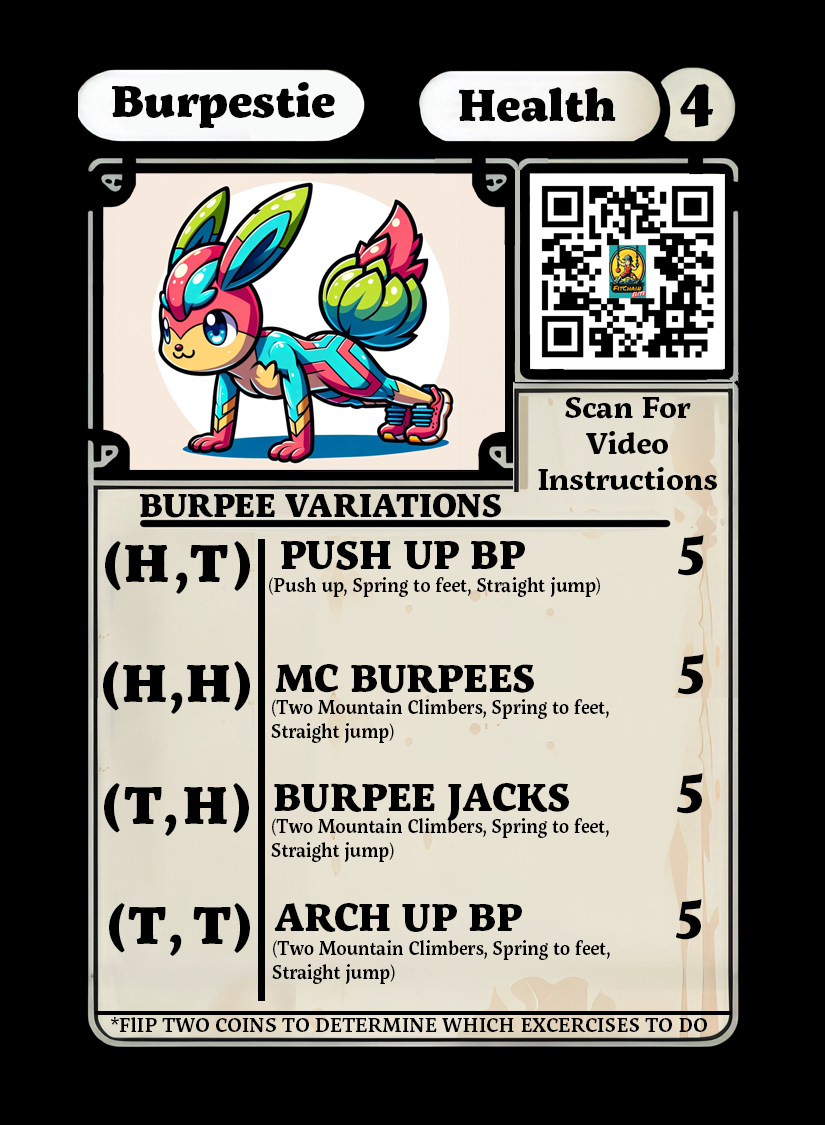
<style>
.page{position:relative;width:825px;height:1125px;background:#000000}
.page>*{position:absolute;margin:0}
.t1{font:45px "ServusSlab-Black";color:#010101}
.t2{font:60px "ServusSlab-Black";color:#010101}
.t3{font:30px "ServusSlab-Bold";color:#010101}
.t4{font:32.7px "ServusSlab-ExtraBold";color:#000000}
.t5{font:53.5px "ServusSlab-Black";letter-spacing:0.1em;color:#010101}
.t6{font:56.9px "ServusSlab-Black";letter-spacing:0.05em;color:#010101}
.t7{font:39.5px "ServusSlab-ExtraBold";color:#000000}
.t8{font:55px "ServusSlab-ExtraBold";color:#000000}
.t9{font:20px "ServusSlab-SemiBold";color:#000000;scale:0.92 1}
.t10{font:20px "ServusSlab-Regular";color:#000000;scale:0.92 1}
.t11{font:53.5px "ServusSlab-Black";letter-spacing:0.05em;color:#000000}
.t12{font:56.9px "ServusSlab-Black";letter-spacing:0.05em;color:#000000}
.t13{font:38.9px "ServusSlab-ExtraBold";color:#000000}
.t14{font:20px "ServusSlab-SemiBold";color:#000000;scale:0.91 1}
.t15{font:20px "ServusSlab-Regular";color:#000000;scale:0.91 1}
.t16{font:53.5px "ServusSlab-Black";letter-spacing:0.2em;color:#000000}
.t17{font:19.9px "ServusSlab-SemiBold";color:#000000}
</style>
<div class="page">
<p class="t1" style="left:112px;top:82px;width:223px;height:46px">Burpestie</p>
<p class="t1" style="left:459px;top:87px;width:157px;height:35px">Health</p>
<p class="t2" style="left:680px;top:84px;width:34px;height:44px">4</p>
<p class="t3" style="left:538px;top:397px;width:179px;height:93px;text-align:center">Scan For Video<br>Instructions</p>
<p class="t4" style="left:139px;top:493px;width:362px;height:25px">BURPEE VARIATIONS</p>
<p class="t5" style="left:105px;top:541px;width:145px;height:53px"><span class="t6">(</span>H,T<span class="t6">)</span></p>
<p class="t7" style="left:281px;top:541px;width:244px;height:29px">PUSH UP BP</p>
<p class="t8" style="left:678px;top:535px;width:26px;height:41px">5</p>
<p class="t9" style="left:269px;top:577px;width:331px;height:20px"><span class="t10">(</span>Push up, Spring to feet, Straight jump<span class="t10">)</span></p>
<p class="t8" style="left:678px;top:654px;width:26px;height:41px">5</p>
<p class="t11" style="left:103px;top:661px;width:147px;height:53px"><span class="t12">(</span>H,H<span class="t12">)</span></p>
<p class="t13" style="left:275px;top:664px;width:259px;height:29px">MC BURPEES</p>
<p class="t14" style="left:271px;top:699px;width:338px;height:44px"><span class="t15">(</span>Two Mountain Climbers, Spring to feet, Straight jump<span class="t15">)</span></p>
<p class="t8" style="left:677px;top:773px;width:26px;height:41px">5</p>
<p class="t5" style="left:104px;top:783px;width:145px;height:53px"><span class="t6">(</span>T,H<span class="t6">)</span></p>
<p class="t13" style="left:274px;top:783px;width:295px;height:38px">BURPEE JACKS</p>
<p class="t14" style="left:271px;top:818px;width:338px;height:44px"><span class="t15">(</span>Two Mountain Climbers, Spring to feet, Straight jump<span class="t15">)</span></p>
<p class="t12" style="left:109px;top:903px;width:141px;height:53px">(<span class="t11">T</span><span class="t16">,</span><span class="t11">T</span>)</p>
<p class="t13" style="left:274px;top:903px;width:248px;height:29px">ARCH UP BP</p>
<p class="t8" style="left:676px;top:899px;width:26px;height:41px">5</p>
<p class="t14" style="left:272px;top:940px;width:338px;height:44px"><span class="t15">(</span>Two Mountain Climbers, Spring to feet, Straight jump<span class="t15">)</span></p>
<p class="t17" style="left:110px;top:1017px;width:597px;height:16px">*FlIP TWO COINS TO DETERMINE WHICH EXCERCISES TO DO</p>
</div>
